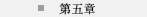
<style>
.page{position:relative;width:147px;height:17px;background:#f1f1f1}
.page>*{position:absolute;margin:0}
.t1{font:12px "SimSun";color:#000000;font-weight:bold}
</style>
<div class="page">
<p class="t1" style="left:39px;top:0px;width:77px;height:18px">第五章</p>
</div>
